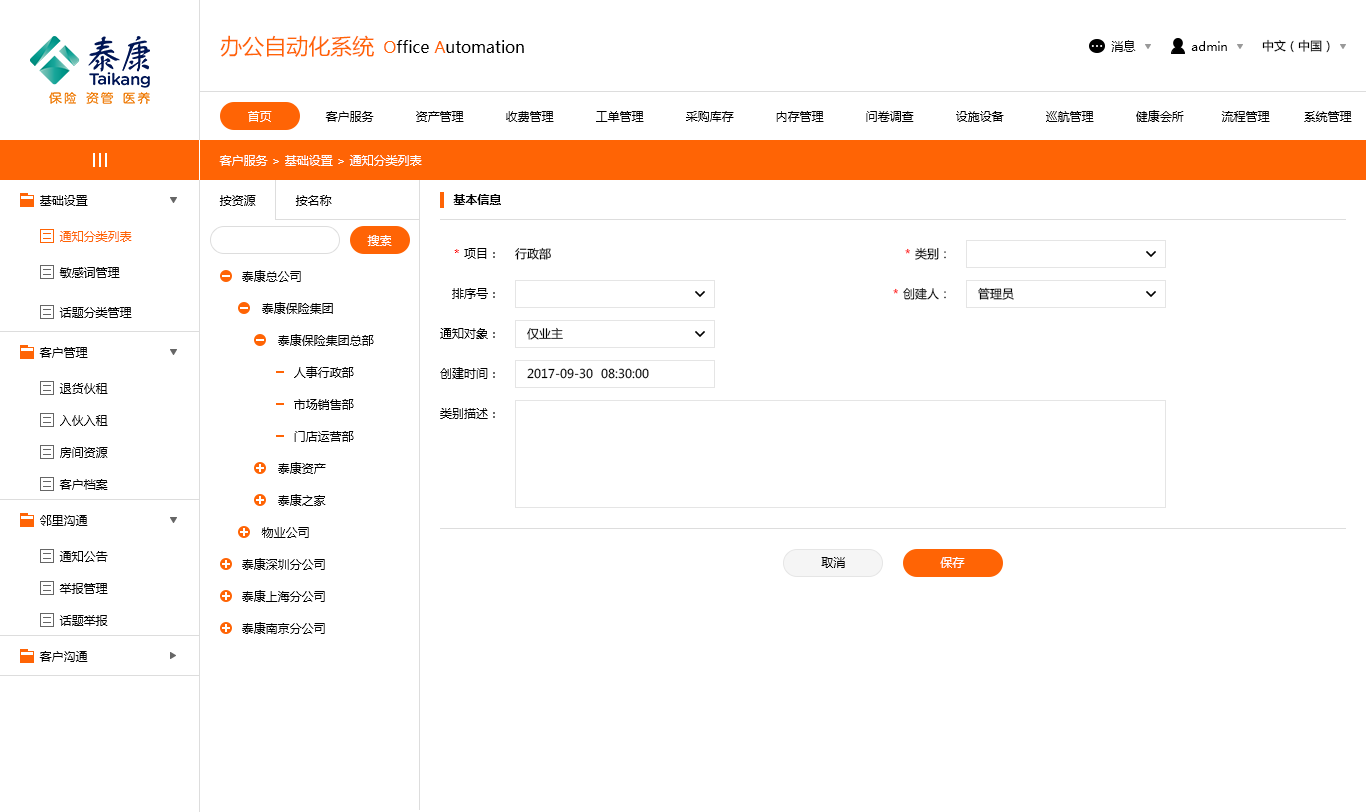
<style>
.page{position:relative;width:1366px;height:812px;background:#ffffff}
.page>*{position:absolute;margin:0}
.t1{font:22px "MicrosoftYaHei";color:#ff6405}
.t2{font:16px "MicrosoftYaHei";color:#000000}
.t3{font:16px "MicrosoftYaHei";color:#ff6405}
.t4{font:12px "MicrosoftYaHei";color:#010101}
.t5{font:12px "MicrosoftYaHei";color:#000000}
.t6{font:12px "MicrosoftYaHei";color:#ffffff}
.t7{font:12px "MicrosoftYaHei-Bold";color:#000000}
.t8{font:12px "MicrosoftYaHei";color:#ff6405}
.t9{font:12px/40px "MicrosoftYaHei";color:#000000}
.t10{font:12px/40px "MicrosoftYaHei";color:#ff0000}
.t11{font:12px/40px "MicrosoftYaHei";color:#010101}
.t12{font:12px/32px "MicrosoftYaHei";color:#000000}
</style>
<div class="page">
<p class="t1" style="left:220px;top:35px;width:154px;height:22px">办公自动化系统</p>
<p class="t2" style="left:384px;top:40px;width:140px;height:13px"><span class="t3">O</span>ffice<span class="t3"> A</span>utomation</p>
<p class="t4" style="left:1111px;top:40px;width:25px;height:12px">消息</p>
<p class="t5" style="left:1191px;top:41px;width:36px;height:10px">admin</p>
<p class="t5" style="left:1262px;top:39px;width:68px;height:14px">中文（中国）</p>
<p class="t6" style="left:248px;top:111px;width:24px;height:11px">首页</p>
<p class="t5" style="left:325px;top:111px;width:49px;height:11px">客户服务</p>
<p class="t5" style="left:416px;top:111px;width:48px;height:11px">资产管理</p>
<p class="t5" style="left:506px;top:111px;width:48px;height:11px">收费管理</p>
<p class="t5" style="left:596px;top:111px;width:48px;height:11px">工单管理</p>
<p class="t5" style="left:686px;top:111px;width:48px;height:11px">采购库存</p>
<p class="t5" style="left:776px;top:111px;width:48px;height:11px">内存管理</p>
<p class="t5" style="left:866px;top:111px;width:48px;height:11px">问卷调查</p>
<p class="t5" style="left:956px;top:111px;width:48px;height:11px">设施设备</p>
<p class="t5" style="left:1046px;top:111px;width:48px;height:11px">巡航管理</p>
<p class="t5" style="left:1136px;top:110px;width:48px;height:12px">健康会所</p>
<p class="t5" style="left:1221px;top:111px;width:49px;height:11px">流程管理</p>
<p class="t5" style="left:1304px;top:111px;width:48px;height:11px">系统管理</p>
<p class="t6" style="left:219px;top:155px;width:203px;height:11px">客户服务 &gt; 基础设置 &gt; 通知分类列表</p>
<p class="t5" style="left:40px;top:195px;width:48px;height:11px">基础设置</p>
<p class="t5" style="left:219px;top:195px;width:37px;height:11px">按资源</p>
<p class="t4" style="left:295px;top:195px;width:37px;height:11px">按名称</p>
<p class="t7" style="left:453px;top:194px;width:48px;height:11px">基本信息</p>
<p class="t8" style="left:59px;top:231px;width:73px;height:11px">通知分类列表</p>
<p class="t6" style="left:367px;top:235px;width:25px;height:11px">搜索</p>
<p class="t9" style="left:440px;top:248px;width:55px;height:171px;text-align:right"><span class="t10">* </span>项目：<br>排序号：<br>通知对象：<br>创建时间：<br>类别描述：</p>
<p class="t9" style="left:515px;top:247px;width:134px;height:132px">行政部<br><br>   仅业主<br>   2017-09-30  08:30:00</p>
<p class="t11" style="left:893px;top:247px;width:53px;height:53px;text-align:right">* 类别：<br>* 创建人：</p>
<p class="t5" style="left:59px;top:267px;width:61px;height:11px">敏感词管理</p>
<p class="t12" style="left:242px;top:270px;width:132px;height:364px">泰康总公司<br>     泰康保险集团 <br>         泰康保险集团总部<br>             人事行政部<br>             市场销售部<br>             门店运营部<br>         泰康资产<br>         泰康之家<br>     物业公司<br>泰康深圳分公司<br>泰康上海分公司<br>泰康南京分公司</p>
<p class="t5" style="left:978px;top:287px;width:36px;height:13px">管理员</p>
<p class="t5" style="left:59px;top:307px;width:73px;height:11px">话题分类管理</p>
<p class="t5" style="left:39px;top:347px;width:49px;height:11px">客户管理</p>
<p class="t5" style="left:59px;top:383px;width:49px;height:11px">退货伙租</p>
<p class="t5" style="left:60px;top:415px;width:48px;height:11px">入伙入租</p>
<p class="t5" style="left:60px;top:447px;width:48px;height:11px">房间资源</p>
<p class="t5" style="left:59px;top:479px;width:49px;height:11px">客户档案</p>
<p class="t5" style="left:40px;top:515px;width:48px;height:11px">邻里沟通</p>
<p class="t5" style="left:59px;top:551px;width:49px;height:11px">通知公告</p>
<p class="t5" style="left:821px;top:557px;width:24px;height:11px">取消</p>
<p class="t6" style="left:940px;top:557px;width:25px;height:11px">保存</p>
<p class="t5" style="left:59px;top:583px;width:49px;height:11px">举报管理</p>
<p class="t5" style="left:59px;top:615px;width:49px;height:11px">话题举报</p>
<p class="t5" style="left:39px;top:651px;width:49px;height:11px">客户沟通</p>
</div>
